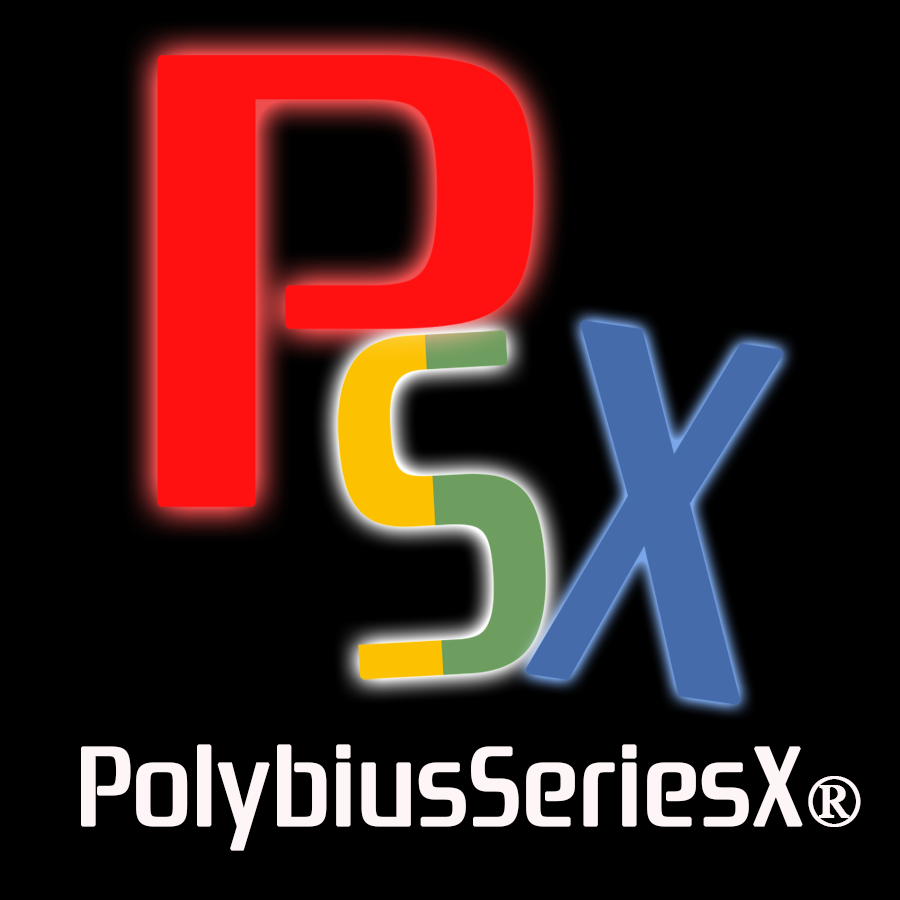
<style>
.page{position:relative;width:900px;height:900px;background:#000000}
.page>*{position:absolute;margin:0}
.t1{font:110px "ZrnicRg-Regular";color:#fef5f6;font-weight:bold}
.t2{font:72px "TimesNewRomanPSMT";color:#fef5f6;font-weight:bold}
</style>
<div class="page">
<p class="t1" style="left:81px;top:744px;width:780px;height:107px">PolybiusSeriesX<span class="t2">®</span></p>
</div>
